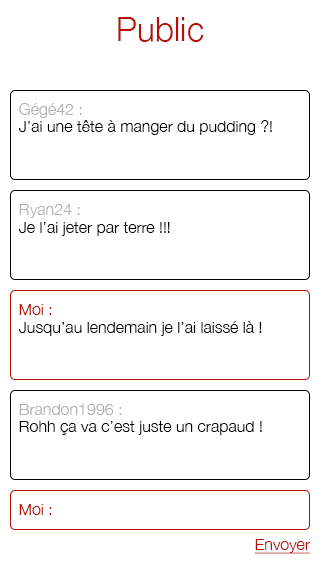
<style>
.page{position:relative;width:320px;height:564px;background:#ffffff}
.page>*{position:absolute;margin:0}
.t1{font:33.3px "HelveticaNeue-Light";color:#b60f06}
.t2{font:16px "HelveticaNeue-Light";color:#b2b2b2}
.t3{font:16px "HelveticaNeue-Light";color:#000000}
.t4{font:16px "HelveticaNeue-Light";color:#b60f06}
.t5{font:16px "HelveticaNeue-Light";color:#b60f06;text-decoration:underline}
</style>
<div class="page">
<p class="t1" style="left:118px;top:17px;width:86px;height:25px">Public</p>
<p class="t2" style="left:19px;top:103px;width:63px;height:15px">Gégé42 :</p>
<p class="t3" style="left:19px;top:120px;width:253px;height:15px">J’ai une tête à manger du pudding ?!</p>
<p class="t2" style="left:19px;top:204px;width:61px;height:14px">Ryan24 :</p>
<p class="t3" style="left:19px;top:222px;width:151px;height:14px">Je l’ai jeter par terre !!!</p>
<p class="t4" style="left:19px;top:304px;width:33px;height:11px">Moi :</p>
<p class="t3" style="left:19px;top:321px;width:243px;height:15px">Jusqu’au lendemain je l’ai laissé là !</p>
<p class="t2" style="left:19px;top:404px;width:103px;height:11px">Brandon1996 :</p>
<p class="t3" style="left:19px;top:421px;width:243px;height:14px">Rohh ça va c’est juste un crapaud !</p>
<p class="t4" style="left:19px;top:504px;width:33px;height:11px">Moi :</p>
<p class="t5" style="left:254px;top:539px;width:57px;height:15px">Envoyer</p>
</div>
